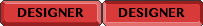
<style>
.page{position:relative;width:203px;height:26px;background:#d83939}
.page>*{position:absolute;margin:0}
.t1{font:12px "MyanmarMN-Bold";color:#000000}
</style>
<div class="page">
<p class="t1" style="left:17px;top:7px;width:67px;height:11px">DESIGNER</p>
<p class="t1" style="left:118px;top:7px;width:67px;height:11px">DESIGNER</p>
</div>
